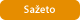
<style>
.page{position:relative;width:80px;height:20px;background:#e68d00}
.page>*{position:absolute;margin:0}
.t1{font:11px "MyriadPro-Semibold";color:#ffffff}
</style>
<div class="page">
<p class="t1" style="left:24px;top:5px;width:31px;height:8px">Sažeto</p>
</div>
